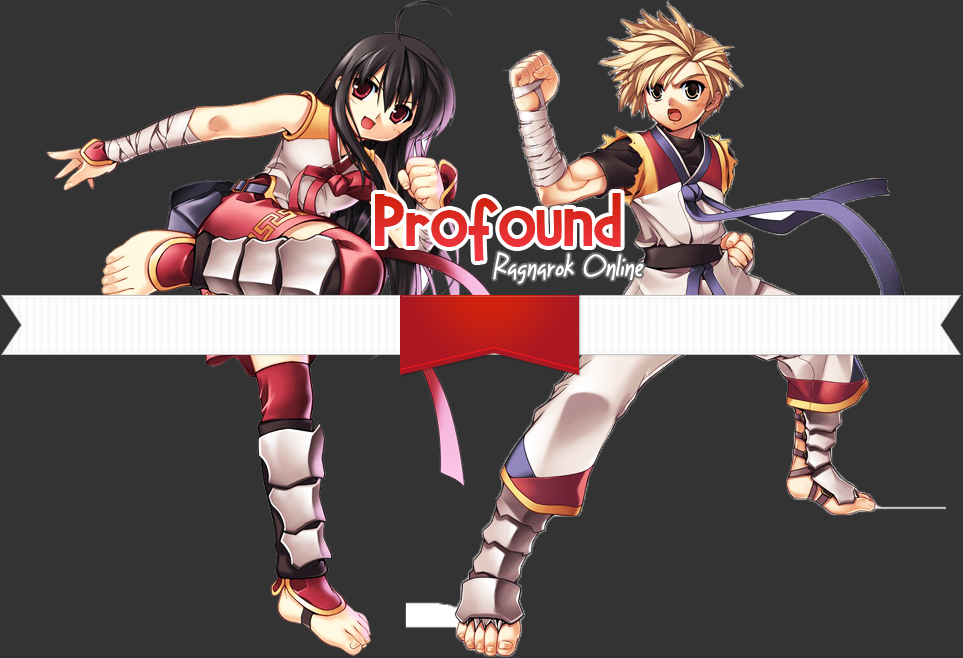
<style>
.page{position:relative;width:963px;height:658px;background:#333333}
.page>*{position:absolute;margin:0}
.t1{font:72px "BabeBamboo";color:#df2b27}
.t2{font:30px "LightuptheWorld";color:#ffffff;font-style:italic}
</style>
<div class="page">
<p class="t1" style="left:375px;top:193px;width:246px;height:68px">Profound</p>
<p class="t2" style="left:493px;top:251px;width:151px;height:33px">Ragnarok Online</p>
</div>
